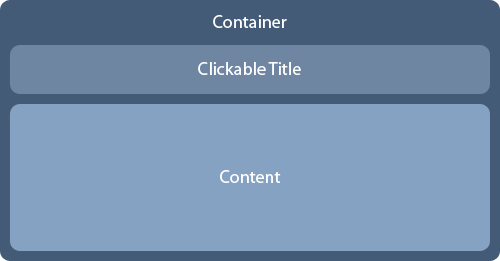
<style>
.page{position:relative;width:500px;height:261px;background:#86a2c2}
.page>*{position:absolute;margin:0}
.t1{font:18px "MyriadPro-Regular";color:#ffffff}
</style>
<div class="page">
<p class="t1" style="left:213px;top:15px;width:74px;height:13px">Container</p>
<p class="t1" style="left:198px;top:62px;width:103px;height:13px">Clickable Title</p>
<p class="t1" style="left:220px;top:170px;width:61px;height:13px">Content</p>
</div>
